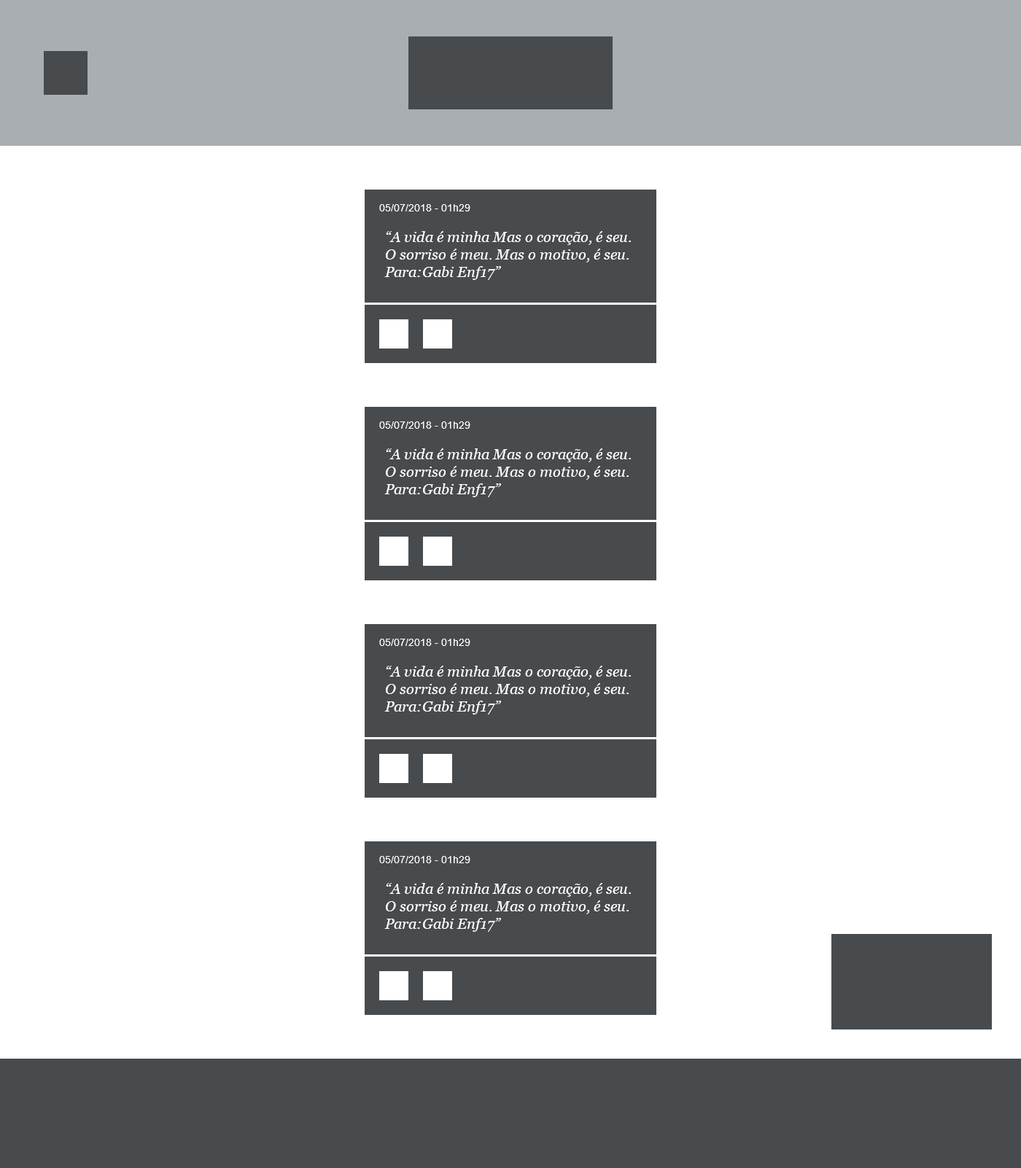
<style>
.page{position:relative;width:1021px;height:1168px;background:#ffffff}
.page>*{position:absolute;margin:0}
.t1{font:10.2px "ArialMT";color:#ffffff}
.t2{font:14.6px/17.5px "Georgia-Italic";color:#ffffff}
</style>
<div class="page">
<p class="t1" style="left:379px;top:204px;width:91px;height:7px">05/07/2018 - 01h29</p>
<p class="t2" style="left:384px;top:231px;width:247px;height:49px">“A vida é minha Mas o coração, é seu. O sorriso é meu. Mas o motivo, é seu. Para:Gabi Enf17”</p>
<p class="t1" style="left:379px;top:421px;width:91px;height:8px">05/07/2018 - 01h29</p>
<p class="t2" style="left:384px;top:448px;width:247px;height:49px">“A vida é minha Mas o coração, é seu. O sorriso é meu. Mas o motivo, é seu. Para:Gabi Enf17”</p>
<p class="t1" style="left:379px;top:639px;width:91px;height:7px">05/07/2018 - 01h29</p>
<p class="t2" style="left:384px;top:666px;width:247px;height:49px">“A vida é minha Mas o coração, é seu. O sorriso é meu. Mas o motivo, é seu. Para:Gabi Enf17”</p>
<p class="t1" style="left:379px;top:856px;width:91px;height:7px">05/07/2018 - 01h29</p>
<p class="t2" style="left:384px;top:883px;width:247px;height:49px">“A vida é minha Mas o coração, é seu. O sorriso é meu. Mas o motivo, é seu. Para:Gabi Enf17”</p>
</div>
